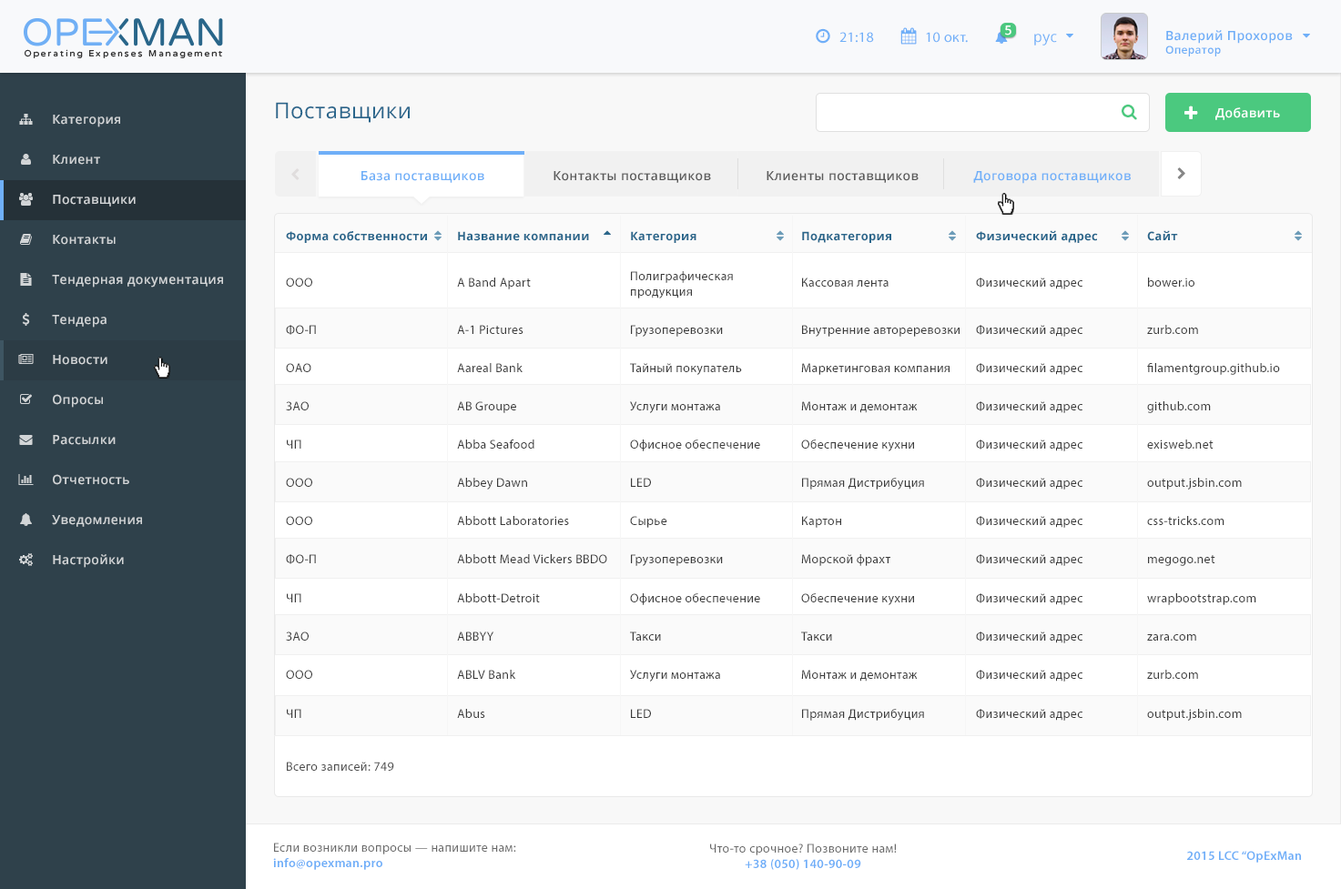
<style>
.page{position:relative;width:1341px;height:889px;background:#ffffff}
.page>*{position:absolute;margin:0}
.t1{font:12.7px "OpenSans-Semibold";letter-spacing:0.025em;color:#ffffff}
.t2{font:14.5px "MyriadPro-Regular";letter-spacing:0.025em;color:#6faff8}
.t3{font:14.5px "OpenSans";letter-spacing:0.025em;color:#6eaff8}
.t4{font:12.7px "OpenSans-Semibold";letter-spacing:0.025em;color:#6eaef7}
.t5{font:10.9px "OpenSans-Semibold";letter-spacing:0.025em;color:#6eaef7}
.t6{font:21.8px "OpenSans";letter-spacing:0.025em;color:#29658b}
.t7{font:12.7px "OpenSans-Semibold";letter-spacing:0.025em;color:#d2d5d7}
.t8{font:12.7px "OpenSans-Semibold";letter-spacing:0.025em;color:#6eaff8}
.t9{font:12.7px "OpenSans-Semibold";letter-spacing:0.025em;color:#5a5a5a}
.t10{font:12.7px "OpenSans-Semibold";letter-spacing:0.025em;color:#6faff8}
.t11{font:11.8px "OpenSans-Bold";letter-spacing:0.025em;color:#29668b}
.t12{font:12.7px "MyriadPro-Regular";letter-spacing:0.025em;color:#3a3a3a}
.t13{font:12.7px "MyriadPro-Regular";letter-spacing:0.025em;color:#4c4c4c}
.t14{font:12.7px "MyriadPro-Regular";letter-spacing:0.025em;color:#696969}
.t15{font:12.7px "MyriadPro-Semibold";letter-spacing:0.025em;color:#6eaef8}
</style>
<div class="page">
<p class="t1" style="left:1005px;top:25px;width:6px;height:11px">5</p>
<p class="t2" style="left:839px;top:32px;width:35px;height:11px">21:18</p>
<p class="t2" style="left:926px;top:32px;width:42px;height:11px">10 окт.</p>
<p class="t3" style="left:1034px;top:34px;width:23px;height:12px">рус</p>
<p class="t4" style="left:1165px;top:30px;width:128px;height:26px">Валерий Прохоров<br><span class="t5">Оператор</span></p>
<p class="t6" style="left:276px;top:102px;width:134px;height:21px">Поставщики</p>
<p class="t1" style="left:1215px;top:107px;width:65px;height:13px">Добавить</p>
<p class="t7" style="left:53px;top:115px;width:67px;height:12px">Категория</p>
<p class="t7" style="left:53px;top:155px;width:47px;height:10px">Клиент</p>
<p class="t8" style="left:361px;top:171px;width:123px;height:12px">База поставщиков</p>
<p class="t9" style="left:553px;top:171px;width:158px;height:12px">Контакты поставщиков</p>
<p class="t9" style="left:766px;top:171px;width:152px;height:12px">Клиенты поставщиков</p>
<p class="t10" style="left:973px;top:171px;width:158px;height:13px">Договора поставщиков</p>
<p class="t7" style="left:53px;top:195px;width:83px;height:12px">Поставщики</p>
<p class="t11" style="left:286px;top:231px;width:141px;height:12px">Форма собственности</p>
<p class="t11" style="left:458px;top:231px;width:131px;height:10px">Название компании</p>
<p class="t11" style="left:631px;top:231px;width:65px;height:12px">Категория</p>
<p class="t11" style="left:802px;top:231px;width:89px;height:12px">Подкатегория</p>
<p class="t11" style="left:976px;top:230px;width:122px;height:13px">Физический адрес</p>
<p class="t11" style="left:1147px;top:230px;width:31px;height:11px">Сайт</p>
<p class="t7" style="left:53px;top:235px;width:63px;height:10px">Контакты</p>
<p class="t7" style="left:52px;top:275px;width:171px;height:13px">Тендерная документация</p>
<p class="t12" style="left:286px;top:278px;width:26px;height:9px">ООО</p>
<p class="t12" style="left:457px;top:278px;width:74px;height:11px">A Band Apart</p>
<p class="t12" style="left:631px;top:271px;width:102px;height:28px">Полиграфическая <br>продукция</p>
<p class="t12" style="left:802px;top:278px;width:86px;height:9px">Кассовая лента</p>
<p class="t12" style="left:976px;top:278px;width:106px;height:11px">Физический адрес</p>
<p class="t12" style="left:1148px;top:278px;width:46px;height:9px">bower.io</p>
<p class="t7" style="left:52px;top:315px;width:55px;height:13px">Тендера</p>
<p class="t12" style="left:286px;top:325px;width:30px;height:10px">ФО-П</p>
<p class="t12" style="left:457px;top:325px;width:66px;height:9px">A-1 Pictures</p>
<p class="t12" style="left:631px;top:325px;width:92px;height:12px">Грузоперевозки</p>
<p class="t12" style="left:802px;top:325px;width:157px;height:12px">Внутренние автореревозки</p>
<p class="t12" style="left:976px;top:325px;width:106px;height:12px">Физический адрес</p>
<p class="t12" style="left:1147px;top:325px;width:51px;height:9px">zurb.com</p>
<p class="t7" style="left:53px;top:355px;width:54px;height:10px">Новости</p>
<p class="t12" style="left:286px;top:363px;width:25px;height:9px">ОАО</p>
<p class="t12" style="left:457px;top:363px;width:65px;height:9px">Aareal Bank</p>
<p class="t12" style="left:630px;top:363px;width:112px;height:12px">Тайный покупатель</p>
<p class="t12" style="left:801px;top:363px;width:148px;height:12px">Маркетинговая компания</p>
<p class="t12" style="left:976px;top:363px;width:106px;height:12px">Физический адрес</p>
<p class="t12" style="left:1147px;top:363px;width:133px;height:12px">filamentgroup.github.io</p>
<p class="t7" style="left:53px;top:394px;width:50px;height:14px">Опросы</p>
<p class="t12" style="left:286px;top:401px;width:23px;height:10px">ЗАО</p>
<p class="t12" style="left:457px;top:401px;width:59px;height:12px">AB Groupe</p>
<p class="t12" style="left:630px;top:401px;width:90px;height:12px">Услуги монтажа</p>
<p class="t12" style="left:801px;top:401px;width:117px;height:12px">Монтаж и демонтаж</p>
<p class="t12" style="left:976px;top:401px;width:106px;height:12px">Физический адрес</p>
<p class="t12" style="left:1147px;top:401px;width:64px;height:12px">github.com</p>
<p class="t7" style="left:53px;top:435px;width:63px;height:10px">Рассылки</p>
<p class="t12" style="left:287px;top:440px;width:14px;height:9px">ЧП</p>
<p class="t12" style="left:457px;top:440px;width:77px;height:9px">Abba Seafood</p>
<p class="t12" style="left:630px;top:440px;width:130px;height:11px">Офисное обеспечение</p>
<p class="t12" style="left:801px;top:440px;width:113px;height:11px">Обеспечение кухни</p>
<p class="t12" style="left:976px;top:440px;width:106px;height:11px">Физический адрес</p>
<p class="t12" style="left:1147px;top:440px;width:66px;height:9px">exisweb.net</p>
<p class="t7" style="left:53px;top:474px;width:76px;height:11px">Отчетность</p>
<p class="t12" style="left:286px;top:478px;width:26px;height:9px">ООО</p>
<p class="t12" style="left:457px;top:478px;width:70px;height:12px">Abbey Dawn</p>
<p class="t12" style="left:631px;top:478px;width:20px;height:9px">LED</p>
<p class="t12" style="left:802px;top:478px;width:122px;height:12px">Прямая Дистрибуция</p>
<p class="t12" style="left:976px;top:478px;width:106px;height:12px">Физический адрес</p>
<p class="t12" style="left:1147px;top:478px;width:95px;height:12px">output.jsbin.com</p>
<p class="t7" style="left:52px;top:515px;width:90px;height:12px">Уведомления</p>
<p class="t12" style="left:286px;top:516px;width:26px;height:9px">ООО</p>
<p class="t12" style="left:457px;top:516px;width:112px;height:9px">Abbott Laboratories</p>
<p class="t12" style="left:630px;top:516px;width:37px;height:12px">Сырье</p>
<p class="t12" style="left:802px;top:516px;width:39px;height:12px">Картон</p>
<p class="t12" style="left:976px;top:516px;width:106px;height:12px">Физический адрес</p>
<p class="t12" style="left:1147px;top:516px;width:77px;height:9px">css-tricks.com</p>
<p class="t7" style="left:53px;top:554px;width:71px;height:14px">Настройки</p>
<p class="t12" style="left:286px;top:554px;width:30px;height:10px">ФО-П</p>
<p class="t12" style="left:457px;top:554px;width:150px;height:9px">Abbott Mead Vickers BBDO</p>
<p class="t12" style="left:631px;top:554px;width:92px;height:12px">Грузоперевозки</p>
<p class="t12" style="left:801px;top:554px;width:89px;height:12px">Морской фрахт</p>
<p class="t12" style="left:976px;top:554px;width:106px;height:12px">Физический адрес</p>
<p class="t12" style="left:1148px;top:555px;width:67px;height:11px">megogo.net</p>
<p class="t12" style="left:287px;top:593px;width:14px;height:10px">ЧП</p>
<p class="t12" style="left:457px;top:593px;width:83px;height:10px">Abbott-Detroit</p>
<p class="t12" style="left:630px;top:593px;width:130px;height:12px">Офисное обеспечение</p>
<p class="t12" style="left:801px;top:593px;width:113px;height:12px">Обеспечение кухни</p>
<p class="t12" style="left:976px;top:593px;width:106px;height:12px">Физический адрес</p>
<p class="t12" style="left:1147px;top:593px;width:109px;height:12px">wrapbootstrap.com</p>
<p class="t12" style="left:286px;top:632px;width:23px;height:9px">ЗАО</p>
<p class="t12" style="left:457px;top:632px;width:37px;height:9px">ABBYY</p>
<p class="t12" style="left:630px;top:632px;width:31px;height:9px">Такси</p>
<p class="t12" style="left:801px;top:632px;width:31px;height:9px">Такси</p>
<p class="t12" style="left:976px;top:632px;width:106px;height:12px">Физический адрес</p>
<p class="t12" style="left:1147px;top:634px;width:49px;height:7px">zara.com</p>
<p class="t12" style="left:286px;top:670px;width:26px;height:9px">ООО</p>
<p class="t12" style="left:457px;top:670px;width:59px;height:9px">ABLV Bank</p>
<p class="t12" style="left:630px;top:670px;width:90px;height:12px">Услуги монтажа</p>
<p class="t12" style="left:801px;top:670px;width:117px;height:12px">Монтаж и демонтаж</p>
<p class="t12" style="left:976px;top:670px;width:106px;height:12px">Физический адрес</p>
<p class="t12" style="left:1147px;top:670px;width:51px;height:9px">zurb.com</p>
<p class="t12" style="left:287px;top:709px;width:14px;height:9px">ЧП</p>
<p class="t12" style="left:457px;top:709px;width:28px;height:9px">Abus</p>
<p class="t12" style="left:631px;top:709px;width:20px;height:9px">LED</p>
<p class="t12" style="left:802px;top:709px;width:122px;height:12px">Прямая Дистрибуция</p>
<p class="t12" style="left:976px;top:709px;width:106px;height:12px">Физический адрес</p>
<p class="t12" style="left:1147px;top:709px;width:95px;height:12px">output.jsbin.com</p>
<p class="t13" style="left:287px;top:762px;width:107px;height:9px">Всего записей: 749</p>
<p class="t14" style="left:273px;top:843px;width:243px;height:27px">Если возникли вопросы — напишите нам:<br><span class="t15">info@opexman.pro</span></p>
<p class="t14" style="left:710px;top:844px;width:187px;height:26px;text-align:center">Что-то срочное? Позвоните нам!<br><span class="t15">+38 (050) 140-90-09</span></p>
<p class="t15" style="left:1187px;top:851px;width:114px;height:12px">2015 LCC “OpExMan</p>
</div>
